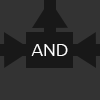
<style>
.page{position:relative;width:100px;height:100px;background:#333333}
.page>*{position:absolute;margin:0}
.t1{font:18px "Ubuntu-Light";color:#ffffff}
</style>
<div class="page">
<p class="t1" style="left:31px;top:44px;width:37px;height:12px">AND</p>
</div>
